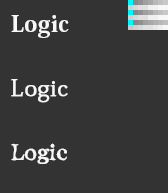
<style>
.page{position:relative;width:168px;height:193px;background:#333333}
.page>*{position:absolute;margin:0}
.t1{font:22px/64px "KozMinPro-Heavy";letter-spacing:0.022em;color:#f8f8f8}
.t2{font:22px/64px "AdobeFangsongStd-Regular";letter-spacing:0.028em;color:#f8f8f8;font-weight:bold}
.t3{font:22px/64px "ComicMysteryStd-DB";letter-spacing:-0.006em;color:#f8f8f8}
</style>
<div class="page">
<p class="t1" style="left:11px;top:15px;width:58px;height:149px">Logic<br><span class="t2">Logic<br></span><span class="t3">Logic</span></p>
</div>
